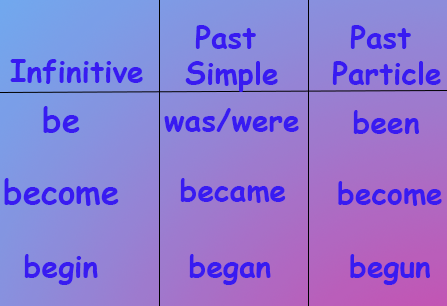
<style>
.page{position:relative;width:447px;height:306px}
.page>*{position:absolute;margin:0}
.t1{font:30px "ComicSansMS-Bold";color:#381bf1}
.t2{font:32.8px "ComicSansMS-Bold";color:#381bf1}
</style>
<div class="page">
<p class="t1" style="left:185px;top:25px;width:93px;height:67px;text-align:center">Past <br>Simple</p>
<p class="t1" style="left:332px;top:25px;width:109px;height:60px;text-align:center">Past <br>Particle</p>
<p class="t1" style="left:10px;top:59px;width:133px;height:25px">Infinitive</p>
<p class="t2" style="left:43px;top:106px;width:37px;height:27px">be</p>
<p class="t1" style="left:164px;top:108px;width:135px;height:24px">was/were</p>
<p class="t1" style="left:353px;top:110px;width:66px;height:24px">been</p>
<p class="t2" style="left:4px;top:178px;width:115px;height:28px">become</p>
<p class="t1" style="left:180px;top:178px;width:106px;height:25px">became</p>
<p class="t1" style="left:338px;top:181px;width:104px;height:25px">become</p>
<p class="t1" style="left:24px;top:254px;width:74px;height:31px">begin</p>
<p class="t1" style="left:189px;top:254px;width:82px;height:31px">began</p>
<p class="t1" style="left:350px;top:254px;width:80px;height:31px">begun</p>
</div>
